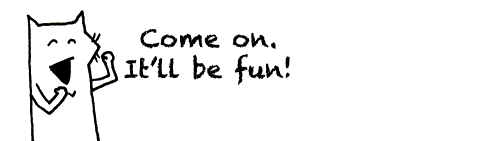
<style>
.page{position:relative;width:500px;height:141px;background:#ffffff}
.page>*{position:absolute;margin:0}
.t1{font:24.5px/30.6px "Chalkduster";letter-spacing:0.01em;color:#000000}
</style>
<div class="page">
<p class="t1" style="left:124px;top:29px;width:166px;height:56px;text-align:center">Come on.<br>It’ll be fun!</p>
</div>
